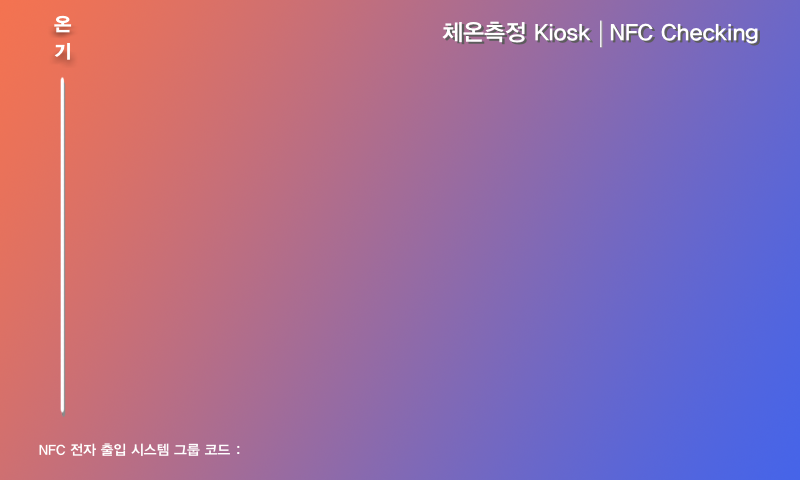
<style>
.page{position:relative;width:800px;height:480px}
.page>*{position:absolute;margin:0}
.t1{font:18.9px/26.5px "YDIYGO360";letter-spacing:-0.006em;color:#ffffff}
.t2{font:22.9px "YDIYGO340";letter-spacing:-0.006em;color:#ffffff}
.t3{font:22.9px "YDIYGO340";letter-spacing:-0.006em}
.t4{font:14px "YDIYGO340";letter-spacing:-0.006em;color:#ffffff}
</style>
<div class="page">
<p class="t1" style="left:54px;top:15px;width:18px;height:45px">온<br>기</p>
<p class="t2" style="left:442px;top:21px;width:149px;height:22px">체온측정 Kiosk</p>
<p class="t2" style="left:610px;top:23px;width:148px;height:21px">NFC Checking</p>
<p class="t3" style="left:612px;top:25px;width:148px;height:21px">NFC Checking</p>
<p class="t4" style="left:39px;top:443px;width:201px;height:13px">NFC 전자 출입 시스템 그룹 코드 :</p>
</div>
